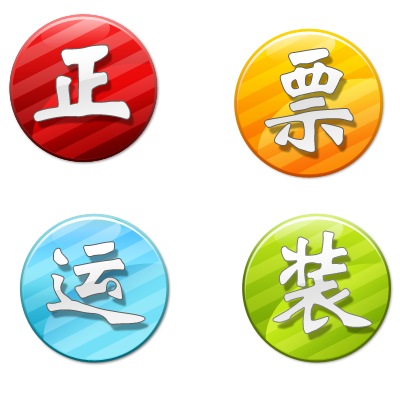
<style>
.page{position:relative;width:400px;height:400px;background:#ffffff}
.page>*{position:absolute;margin:0}
.t1{font:120px "STXinwei";letter-spacing:-0.06em;color:#f0f0f0;font-weight:bold}
.t2{font:120px "STXinwei";letter-spacing:-0.06em;color:#f2f2f2}
.t3{font:120px "STXinwei";letter-spacing:-0.06em;color:#f3f3f3}
</style>
<div class="page">
<p class="t1" style="left:34px;top:45px;width:96px;height:76px">正</p>
<p class="t2" style="left:265px;top:48px;width:88px;height:104px">票</p>
<p class="t2" style="left:273px;top:231px;width:99px;height:103px">装</p>
<p class="t3" style="left:47px;top:242px;width:98px;height:82px">运</p>
</div>
